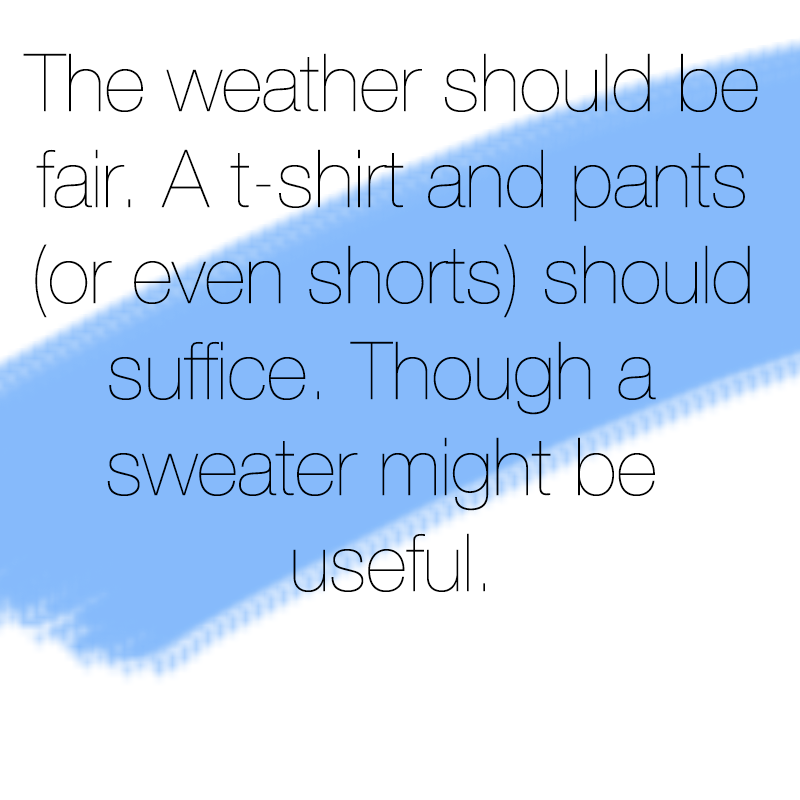
<style>
.page{position:relative;width:800px;height:800px;background:#ffffff}
.page>*{position:absolute;margin:0}
.t1{font:80px "HelveticaNeue-UltraLight";color:#000000}
</style>
<div class="page">
<p class="t1" style="left:23px;top:53px;width:735px;height:539px;text-align:center">The weather should be<br>fair. A t-shirt and pants<br>(or even shorts) should<br>suffice. Though a <br>sweater might be <br>useful.</p>
</div>
